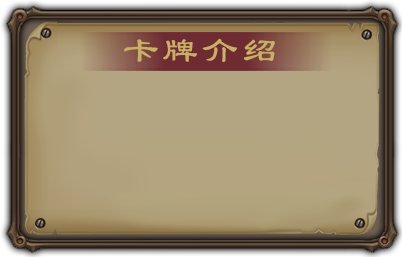
<style>
.page{position:relative;width:402px;height:257px}
.page>*{position:absolute;margin:0}
.t1{font:36px "LiSu";letter-spacing:0.16em;color:#c8b066}
</style>
<div class="page">
<p class="t1" style="left:124px;top:38px;width:151px;height:25px">卡牌介绍</p>
</div>
